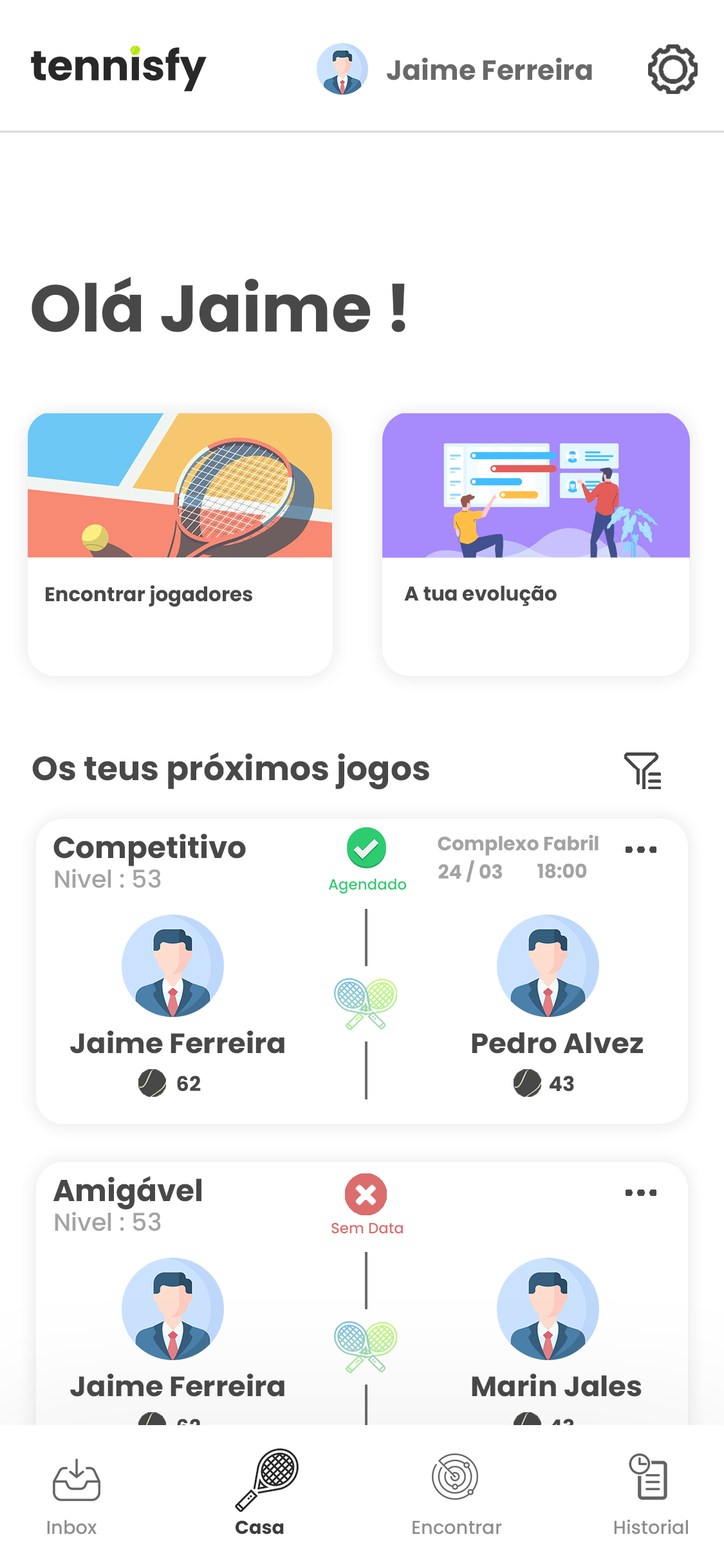
<style>
.page{position:relative;width:724px;height:1568px;background:#ffffff}
.page>*{position:absolute;margin:0}
.t1{font:27.7px "Poppins-Bold";color:#696969}
.t2{font:65.8px "Poppins-Bold";color:#484848}
.t3{font:19.9px "Poppins-Bold";color:#484848}
.t4{font:33.5px "Poppins-Bold";color:#484848}
.t5{font:30.3px "Poppins-Bold";color:#484848}
.t6{font:19.3px "Poppins-Bold";color:#a3a3a3}
.t7{font:24.5px "Poppins-Medium";color:#a3a3a3}
.t8{font:14.8px "Poppins-Medium";color:#2ecc71}
.t9{font:28px "Poppins-Bold";color:#484848;scale:1.03 1}
.t10{font:20.4px "Poppins-Bold";color:#484848}
.t11{font:14.8px "Poppins-Medium";color:#dc6d6d}
.t12{font:20.4px "Poppins-Bold"}
.t13{font:18.7px "Poppins-Medium";color:#8d8d8d}
.t14{font:18.7px "Poppins-Bold";color:#3d3d3d}
</style>
<div class="page">
<p class="t1" style="left:387px;top:57px;width:205px;height:23px">Jaime Ferreira</p>
<p class="t2" style="left:32px;top:277px;width:374px;height:55px">Olá Jaime !</p>
<p class="t3" style="left:46px;top:585px;width:206px;height:22px">Encontrar jogadores</p>
<p class="t3" style="left:404px;top:585px;width:153px;height:21px">A tua evolução</p>
<p class="t4" style="left:32px;top:752px;width:397px;height:38px">Os teus próximos jogos</p>
<p class="t5" style="left:53px;top:834px;width:193px;height:32px">Competitivo</p>
<p class="t6" style="left:438px;top:835px;width:161px;height:20px">Complexo Fabril</p>
<p class="t7" style="left:55px;top:868px;width:106px;height:20px">Nivel : 53</p>
<p class="t6" style="left:438px;top:860px;width:64px;height:22px">24 / 03</p>
<p class="t6" style="left:537px;top:863px;width:50px;height:16px">18:00</p>
<p class="t8" style="left:328px;top:879px;width:79px;height:15px">Agendado</p>
<p class="t9" style="left:70px;top:1031px;width:215px;height:23px">Jaime Ferreira</p>
<p class="t9" style="left:472px;top:1032px;width:171px;height:22px">Pedro Alvez</p>
<p class="t10" style="left:177px;top:1076px;width:24px;height:15px">62</p>
<p class="t10" style="left:550px;top:1076px;width:24px;height:16px">43</p>
<p class="t5" style="left:53px;top:1176px;width:148px;height:33px">Amigável</p>
<p class="t7" style="left:55px;top:1211px;width:106px;height:20px">Nivel : 53</p>
<p class="t11" style="left:331px;top:1222px;width:72px;height:12px">Sem Data</p>
<p class="t9" style="left:70px;top:1374px;width:215px;height:23px">Jaime Ferreira</p>
<p class="t9" style="left:472px;top:1374px;width:170px;height:23px">Marin Jales</p>
<p class="t12" style="left:177px;top:1419px;width:24px;height:15px">62</p>
<p class="t12" style="left:550px;top:1419px;width:24px;height:16px">43</p>
<p class="t13" style="left:47px;top:1520px;width:50px;height:15px">Inbox</p>
<p class="t14" style="left:236px;top:1520px;width:48px;height:15px">Casa</p>
<p class="t13" style="left:413px;top:1520px;width:89px;height:15px">Encontrar</p>
<p class="t13" style="left:614px;top:1519px;width:74px;height:16px">Historial</p>
</div>
